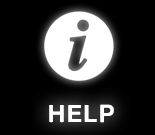
<style>
.page{position:relative;width:155px;height:135px;background:#000000}
.page>*{position:absolute;margin:0}
.t1{font:24px "AlteHaasGrotesk_Bold";letter-spacing:0.05em;color:#ffffff}
</style>
<div class="page">
<p class="t1" style="left:49px;top:104px;width:65px;height:19px">HELP</p>
</div>
